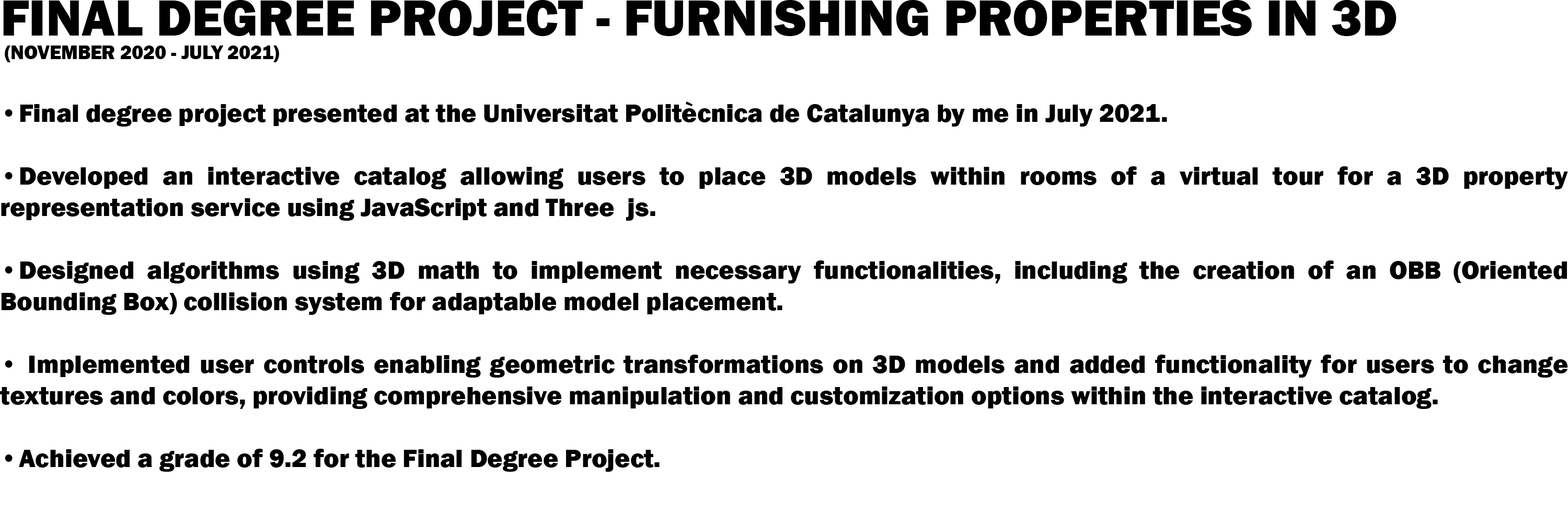
<style>
.page{position:relative;width:1568px;height:523px;background:#ffffff}
.page>*{position:absolute;margin:0}
.t1{font:26.1px "FranklinGothic-Heavy";color:#000000}
.t2{font:52.3px "FranklinGothic-Heavy";color:#000000}
.t3{font:19.6px "FranklinGothic-Heavy";color:#000000}
</style>
<div class="page">
<p class="t1" style="left:0px;top:0px;width:1568px;height:471px"><span class="t2">FINAL DEGREE PROJECT - FURNISHING PROPERTIES IN 3D<br></span><span class="t3"> (NOVEMBER 2020 - JULY 2021)<br></span><br>• Final degree project presented at the Universitat Politècnica de Catalunya by me in July 2021.<br><br>• Developed an interactive catalog allowing users to place 3D models within rooms of a virtual tour for a 3D property representation service using JavaScript and Three  js.<br><br>• Designed algorithms using 3D math to implement necessary functionalities, including the creation of an OBB (Oriented Bounding Box) collision system for adaptable model placement.<br><br>•  Implemented user controls enabling geometric transformations on 3D models and added functionality for users to change textures and colors, providing comprehensive manipulation and customization options within the interactive catalog.<br><br>• Achieved a grade of 9.2 for the Final Degree Project.</p>
</div>
